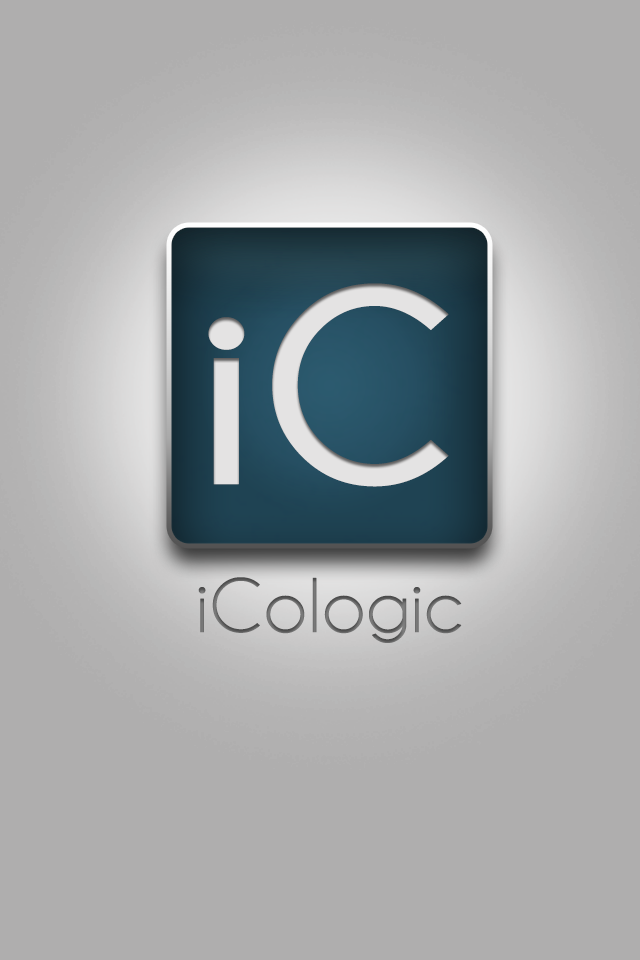
<style>
.page{position:relative;width:640px;height:960px;background:#afaeae}
.page>*{position:absolute;margin:0}
.t1{font:281.4px "Champagne&Limousines-Bold";color:#e4e3e3;font-weight:bold}
.t2{font:78.1px "Champagne&Limousines";color:#696969;font-weight:bold}
</style>
<div class="page">
<p class="t1" style="left:208px;top:283px;width:241px;height:204px">iC</p>
<p class="t2" style="left:198px;top:577px;width:264px;height:66px">iCologic</p>
</div>
